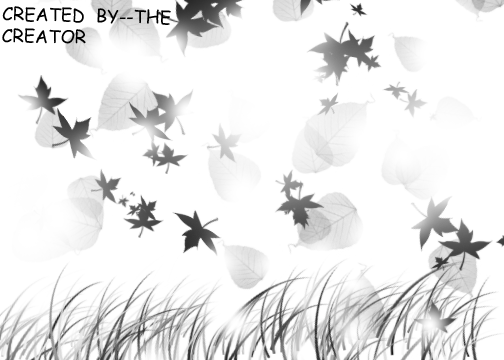
<style>
.page{position:relative;width:504px;height:360px;background:#ffffff}
.page>*{position:absolute;margin:0}
.t1{font:18px "ComicSansMS";color:#000000}
</style>
<div class="page">
<p class="t1" style="left:2px;top:6px;width:169px;height:38px;rotate:1deg">CREATED  BY--THE CREATOR</p>
</div>
